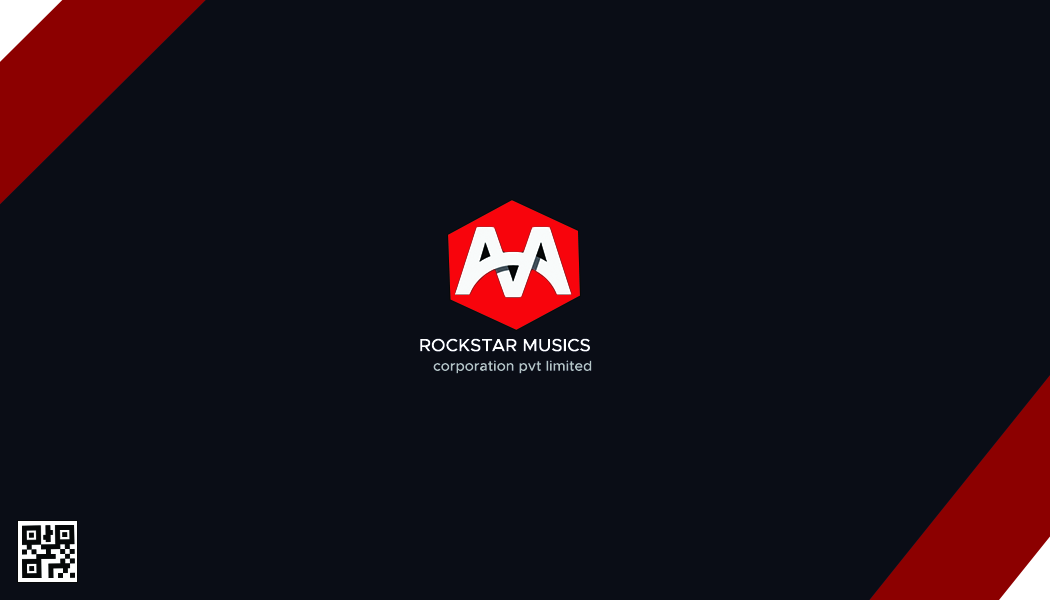
<style>
.page{position:relative;width:1050px;height:600px;background:#0a0d16}
.page>*{position:absolute;margin:0}
.t1{font:17.8px "Metropolis-Medium";color:#feffff;text-transform:uppercase}
.t2{font:14.2px "Metropolis-Medium";color:#b4c4c3}
</style>
<div class="page">
<p class="t1" style="left:420px;top:338px;width:170px;height:14px">rockstar musics</p>
<p class="t2" style="left:433px;top:360px;width:159px;height:14px">corporation pvt limited</p>
</div>
